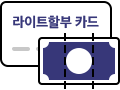
<style>
.page{position:relative;width:120px;height:90px;background:#ffffff}
.page>*{position:absolute;margin:0}
.t1{font:14px "AppleSDGothicNeoEB00";letter-spacing:-0.02em;color:#373779}
</style>
<div class="page">
<p class="t1" style="left:13px;top:15px;width:86px;height:14px">라이트할부 카드</p>
</div>
